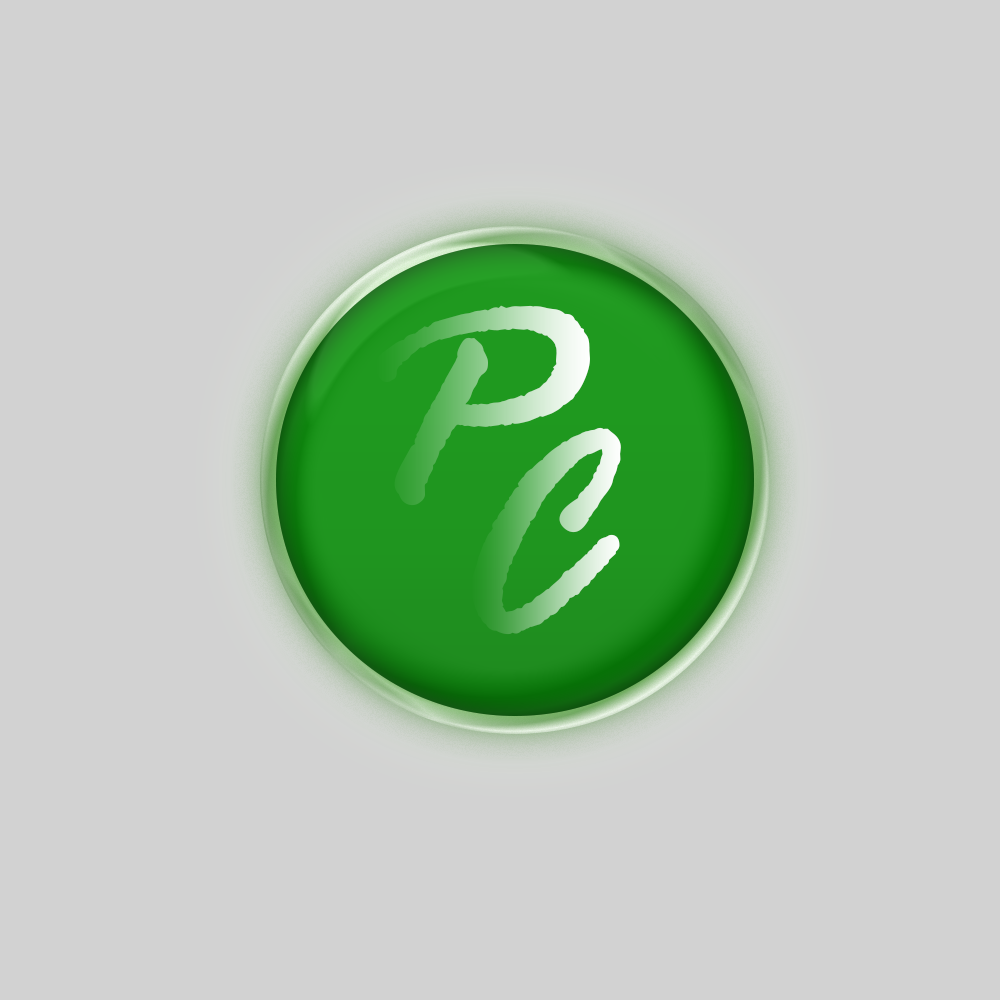
<style>
.page{position:relative;width:1000px;height:1000px;background:#d2d2d2}
.page>*{position:absolute;margin:0}
.t1{font:300px "RageItalic";font-weight:bold}
</style>
<div class="page">
<p class="t1" style="left:375px;top:305px;width:215px;height:201px">P</p>
<p class="t1" style="left:471px;top:427px;width:150px;height:208px">C</p>
</div>
